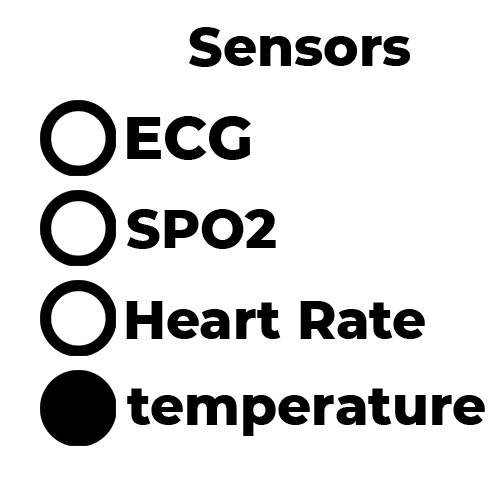
<style>
.page{position:relative;width:500px;height:500px;background:#ffffff}
.page>*{position:absolute;margin:0}
.t1{font:53.3px "Montserrat-ExtraBold";color:#000000}
.t2{font:60px "Montserrat-ExtraBold";color:#000000}
</style>
<div class="page">
<p class="t1" style="left:189px;top:27px;width:221px;height:40px">Sensors</p>
<p class="t2" style="left:127px;top:116px;width:124px;height:44px">ECG</p>
<p class="t1" style="left:127px;top:209px;width:149px;height:40px">SPO2</p>
<p class="t1" style="left:126px;top:301px;width:299px;height:38px">Heart Rate</p>
<p class="t1" style="left:127px;top:388px;width:358px;height:48px">temperature</p>
</div>
